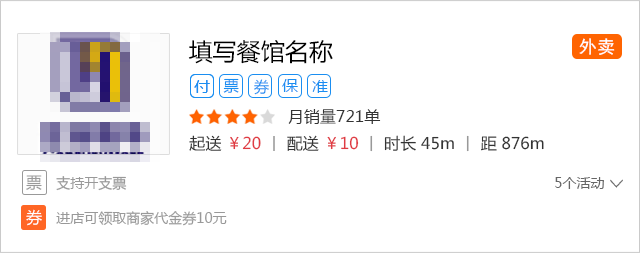
<style>
.page{position:relative;width:640px;height:253px;background:#ffffff}
.page>*{position:absolute;margin:0}
.t1{font:24px "MicrosoftYaHei";color:#000000}
.t2{font:18px "SimHei";color:#ffffff}
.t3{font:15.4px "MicrosoftYaHei";color:#1a8ef1}
.t4{font:16px "MicrosoftYaHei";color:#333333}
.t5{font:16px "MicrosoftYaHei";color:#e03b43}
.t6{font:16px "MicrosoftYaHei";color:#999999}
.t7{font:14px "MicrosoftYaHei";color:#999999}
.t8{font:14px "MicrosoftYaHei";color:#666666}
.t9{font:18px "¿¬Ìå";color:#666666}
.t10{font:16px "MicrosoftYaHei";color:#ffffff}
</style>
<div class="page">
<p class="t1" style="left:188px;top:40px;width:145px;height:24px">填写餐馆名称</p>
<p class="t2" style="left:579px;top:38px;width:36px;height:17px">外卖</p>
<p class="t3" style="left:223px;top:78px;width:16px;height:15px">票</p>
<p class="t3" style="left:194px;top:80px;width:16px;height:13px">付</p>
<p class="t3" style="left:194px;top:80px;width:16px;height:13px">付</p>
<p class="t3" style="left:254px;top:79px;width:15px;height:16px">券</p>
<p class="t3" style="left:282px;top:79px;width:16px;height:13px">保</p>
<p class="t3" style="left:312px;top:80px;width:16px;height:13px">准</p>
<p class="t4" style="left:288px;top:109px;width:93px;height:15px">月销量721单</p>
<p class="t4" style="left:189px;top:135px;width:355px;height:17px">起送 <span class="t5">￥20 </span><span class="t6">丨</span> 配送 <span class="t5">￥10 </span><span class="t6">丨</span> 时长 45m <span class="t6">丨</span> 距 876m</p>
<p class="t7" style="left:26px;top:175px;width:578px;height:16px"><span class="t6">票   </span>支持开支票    　　　　　　　　　　　　　　　　　　　　　　   <span class="t8">                      5个活动</span></p>
<p class="t9" style="left:610px;top:179px;width:13px;height:9px;rotate:90deg">&gt;</p>
<p class="t7" style="left:26px;top:209px;width:201px;height:17px"><span class="t10">券   </span>进店可领取商家代金券10元</p>
</div>
